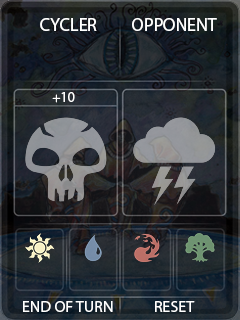
<style>
.page{position:relative;width:240px;height:320px}
.page>*{position:absolute;margin:0}
.t1{font:18px "MyriadPro-Regular";color:#ffffff}
.t2{font:14px "MyriadPro-Regular";color:#ffffff}
.t3{font:16px "MyriadPro-Regular";color:#ffffff}
</style>
<div class="page">
<p class="t1" style="left:40px;top:18px;width:57px;height:13px">CYCLER</p>
<p class="t1" style="left:132px;top:18px;width:85px;height:13px">OPPONENT</p>
<p class="t2" style="left:52px;top:92px;width:23px;height:11px">+10</p>
<p class="t3" style="left:23px;top:301px;width:90px;height:11px">END OF TURN</p>
<p class="t3" style="left:155px;top:301px;width:40px;height:11px">RESET</p>
</div>
